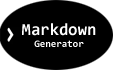
<style>
.page{position:relative;width:113px;height:70px;background:#000000}
.page>*{position:absolute;margin:0}
.t1{font:10px "Consolas-Bold";color:#ffffff}
.t2{font:17px "Consolas-Bold";color:#ffffff}
</style>
<div class="page">
<p class="t1" style="left:22px;top:23px;width:74px;height:24px;text-align:center"><span class="t2">Markdown<br></span>Generator</p>
</div>
